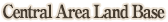
<style>
.page{position:relative;width:168px;height:22px;background:#ffffff}
.page>*{position:absolute;margin:0}
.t1{font:18px "RyuminPro-ExBold";letter-spacing:-0.08em;color:#534738;scale:0.9 1}
</style>
<div class="page">
<p class="t1" style="left:3px;top:4px;width:162px;height:15px">Central Area Land Base</p>
</div>
